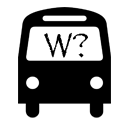
<style>
.page{position:relative;width:128px;height:128px;background:#ffffff}
.page>*{position:absolute;margin:0}
.t1{font:36px "Papyrus";color:#000000}
</style>
<div class="page">
<p class="t1" style="left:44px;top:32px;width:44px;height:26px">W?</p>
</div>
